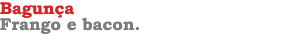
<style>
.page{position:relative;width:300px;height:50px;background:#ffffff}
.page>*{position:absolute;margin:0}
.t1{font:17px "BookmanOldStyle-Bold";color:#d42525}
.t2{font:17px "BookmanOldStyle-Bold";color:#7c7c79}
</style>
<div class="page">
<p class="t1" style="left:0px;top:2px;width:74px;height:16px">Bagunça</p>
<p class="t2" style="left:0px;top:17px;width:139px;height:17px">Frango e bacon.</p>
</div>
